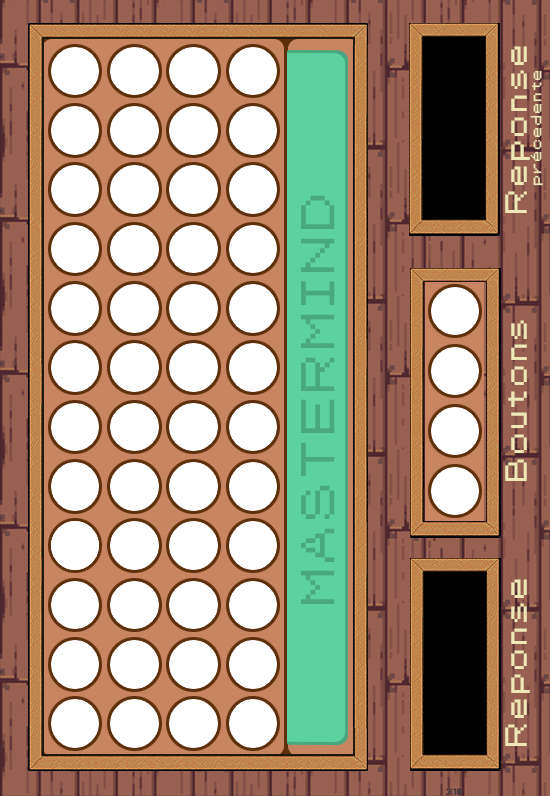
<style>
.page{position:relative;width:550px;height:796px;background:#ffffff}
.page>*{position:absolute;margin:0}
.t1{font:12px "Pokemon-Classic";color:#efe7b5}
.t2{font:24.7px "Pokemon-Classic";color:#efe7b5}
.t3{font:38px "Pokemon-Classic";color:#49a880}
</style>
<div class="page">
<p class="t1" style="left:505px;top:46px;width:38px;height:167px;text-align:center;rotate:-90deg"><span class="t2">Reponse<br></span>précedente</p>
<p class="t3" style="left:301px;top:195px;width:34px;height:409px;rotate:-90deg">MASTERMIND</p>
<p class="t2" style="left:505px;top:320px;width:22px;height:161px;rotate:-90deg">Boutons</p>
<p class="t2" style="left:505px;top:579px;width:25px;height:167px;rotate:-90deg">Reponse</p>
</div>
